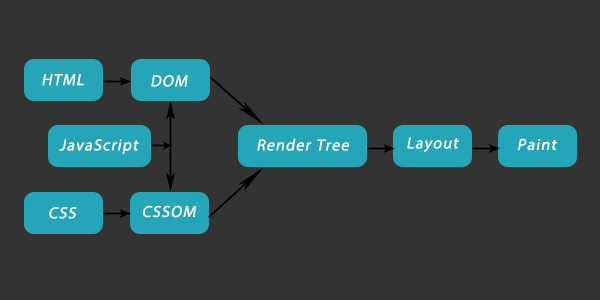
<style>
.page{position:relative;width:600px;height:300px;background:#333333}
.page>*{position:absolute;margin:0}
.t1{font:16px "MyriadPro-Regular";letter-spacing:0.075em;color:#ffffff;font-style:italic}
</style>
<div class="page">
<p class="t1" style="left:42px;top:74px;width:42px;height:12px">HTML</p>
<p class="t1" style="left:151px;top:75px;width:37px;height:12px">DOM</p>
<p class="t1" style="left:407px;top:137px;width:52px;height:15px">Layout</p>
<p class="t1" style="left:59px;top:139px;width:80px;height:15px">JavaScript</p>
<p class="t1" style="left:257px;top:138px;width:92px;height:13px">Render Tree</p>
<p class="t1" style="left:518px;top:138px;width:39px;height:13px">Paint</p>
<p class="t1" style="left:49px;top:207px;width:28px;height:12px">CSS</p>
<p class="t1" style="left:143px;top:205px;width:53px;height:13px">CSSOM</p>
</div>
